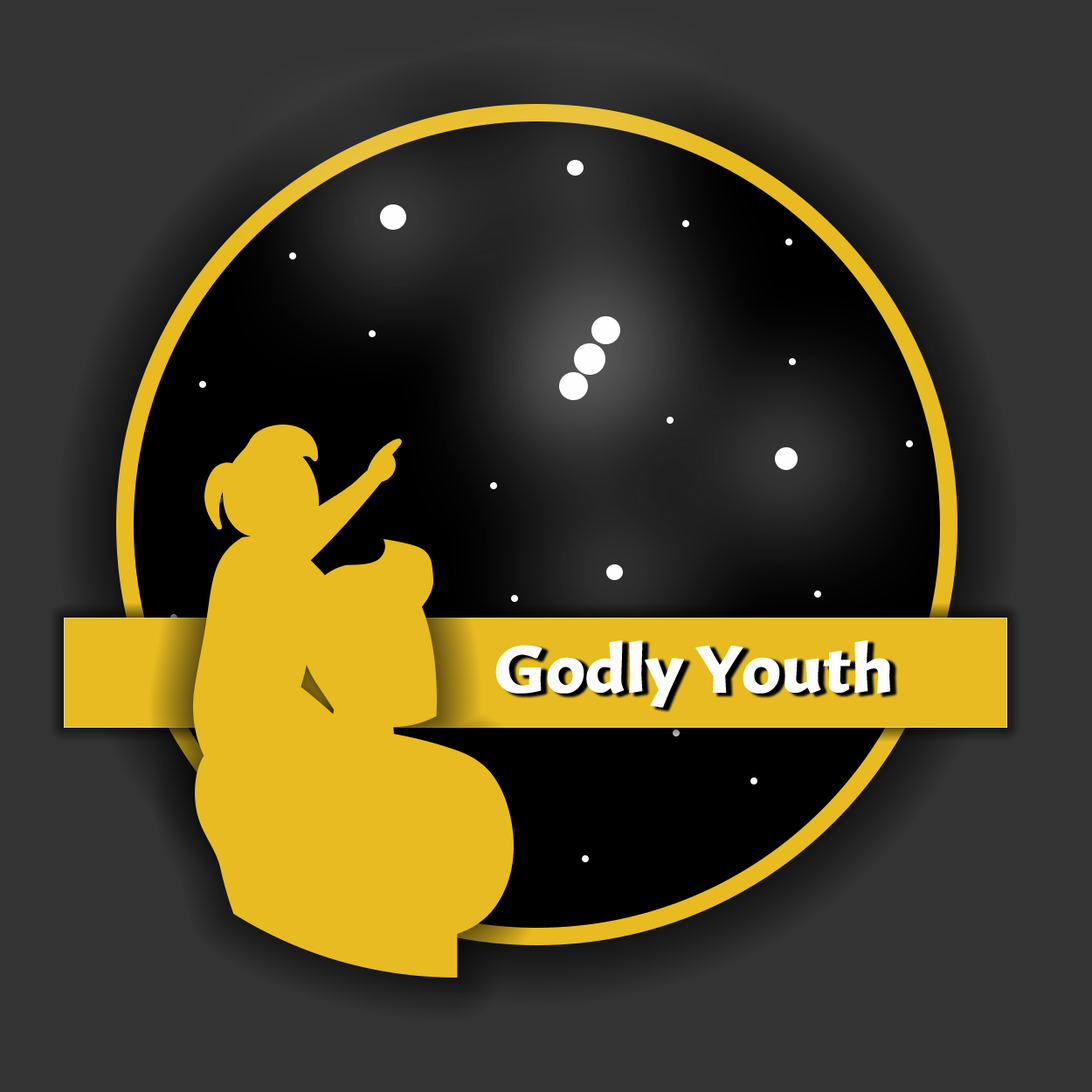
<style>
.page{position:relative;width:1092px;height:1092px;background:#333333}
.page>*{position:absolute;margin:0}
.t1{font:66.4px "Acme-Regular";letter-spacing:-0.025em;color:#fdfdfd;font-weight:bold;scale:1.21 1}
</style>
<div class="page">
<p class="t1" style="left:495px;top:640px;width:395px;height:68px">Godly Youth</p>
</div>
